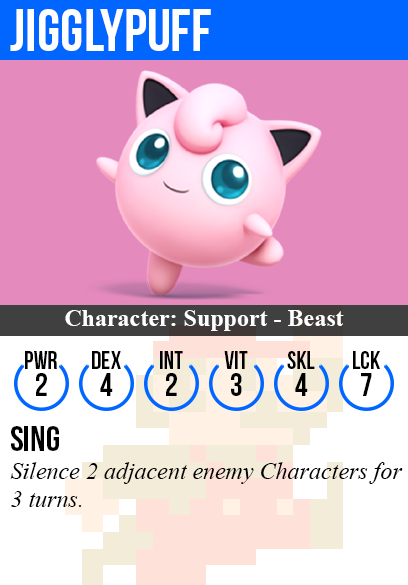
<style>
.page{position:relative;width:408px;height:585px;background:#e48abd}
.page>*{position:absolute;margin:0}
.t1{font:60px "BebasNeue";color:#ffffff}
.t2{font:24px "TimesNewRomanPS-BoldMT";color:#ffffff}
.t3{font:25px "BebasNeue";color:#000000}
.t4{font:32px "BebasNeue";color:#000000}
.t5{font:36px "BebasNeue";color:#000000}
.t6{font:24px "TimesNewRomanPS-ItalicMT";color:#000000}
</style>
<div class="page">
<p class="t1" style="left:10px;top:9px;width:201px;height:42px">jigglypuff</p>
<p class="t2" style="left:65px;top:310px;width:279px;height:21px">Character: Support - Beast</p>
<p class="t3" style="left:25px;top:351px;width:32px;height:18px">PWR</p>
<p class="t3" style="left:92px;top:351px;width:29px;height:18px">dex</p>
<p class="t3" style="left:160px;top:351px;width:23px;height:18px">int</p>
<p class="t3" style="left:224px;top:351px;width:24px;height:18px">vit</p>
<p class="t3" style="left:287px;top:351px;width:28px;height:18px">skl</p>
<p class="t3" style="left:353px;top:351px;width:27px;height:18px">lck</p>
<p class="t4" style="left:36px;top:373px;width:11px;height:23px">2</p>
<p class="t4" style="left:100px;top:373px;width:13px;height:23px">4</p>
<p class="t4" style="left:166px;top:373px;width:11px;height:23px">2</p>
<p class="t4" style="left:231px;top:373px;width:11px;height:23px">3</p>
<p class="t4" style="left:295px;top:373px;width:13px;height:23px">4</p>
<p class="t4" style="left:361px;top:373px;width:11px;height:23px">7</p>
<p class="t5" style="left:11px;top:426px;width:48px;height:25px">sing</p>
<p class="t6" style="left:10px;top:462px;width:393px;height:45px">Silence 2 adjacent enemy Characters for<br>3 turns.</p>
</div>
